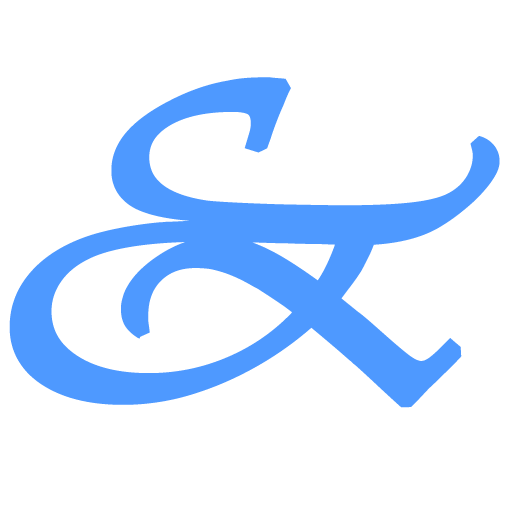
<style>
.page{position:relative;width:512px;height:512px;background:#ffffff}
.page>*{position:absolute;margin:0}
.t1{font:470.2px "Vivaldi";letter-spacing:0.3em;color:#4e99ff;font-weight:bold;scale:1.07 1}
</style>
<div class="page">
<p class="t1" style="left:9px;top:77px;width:491px;height:331px">&amp;</p>
</div>
